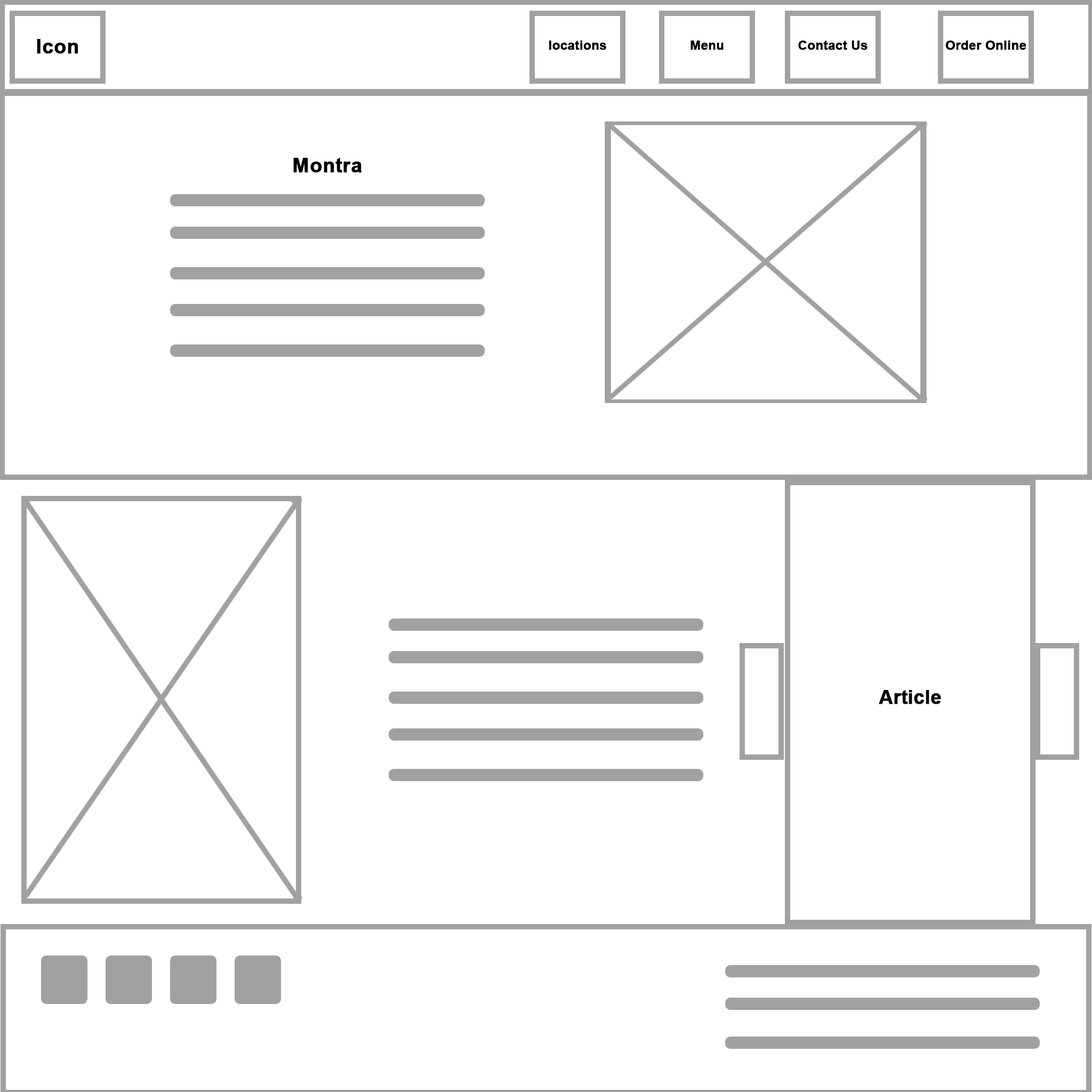
<style>
.page{position:relative;width:1092px;height:1092px;background:#ffffff}
.page>*{position:absolute;margin:0}
.t1{font:20px "Arial-BoldMT";color:#010101;font-weight:bold}
.t2{font:12.6px "Arial-BoldMT";color:#000000;font-weight:bold}
.t3{font:20px "Arial-BoldMT";color:#000000;font-weight:bold}
.t4{font:19.2px "Arial-BoldMT";color:#000000;font-weight:bold}
</style>
<div class="page">
<p class="t1" style="left:37px;top:39px;width:41px;height:15px">Icon</p>
<p class="t2" style="left:549px;top:41px;width:57px;height:9px">locations</p>
<p class="t2" style="left:690px;top:41px;width:34px;height:9px">Menu</p>
<p class="t2" style="left:798px;top:41px;width:70px;height:9px">Contact Us</p>
<p class="t2" style="left:945px;top:41px;width:81px;height:9px">Order Online</p>
<p class="t3" style="left:293px;top:158px;width:69px;height:15px">Montra</p>
<p class="t4" style="left:879px;top:690px;width:62px;height:14px">Article</p>
</div>
